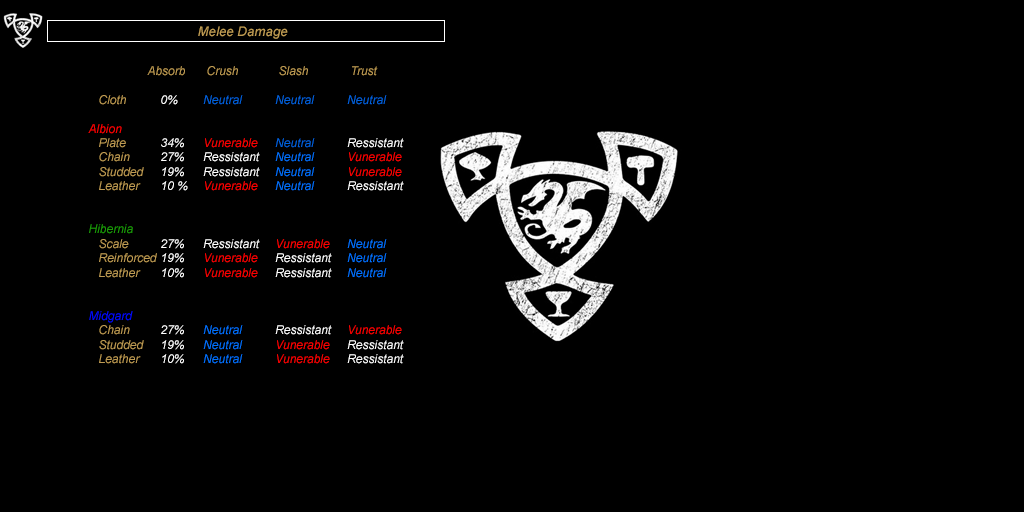
<style>
.page{position:relative;width:1024px;height:512px;background:#000000}
.page>*{position:absolute;margin:0}
.t1{font:13.3px "Arial-ItalicMT";color:#be9b53}
.t2{font:12px "Arial-ItalicMT";color:#be9b53}
.t3{font:12px "Arial-ItalicMT";color:#ff0000}
.t4{font:12px "Arial-ItalicMT";color:#ffffff}
.t5{font:12px "Arial-ItalicMT";color:#0062dd}
.t6{font:12px "Arial-ItalicMT";color:#0072ff}
.t7{font:12px "Arial-ItalicMT";color:#1c9b07}
.t8{font:12px "Arial-ItalicMT";color:#000cff}
</style>
<div class="page">
<p class="t1" style="left:198px;top:26px;width:90px;height:13px">Melee Damage</p>
<p class="t2" style="left:88px;top:66px;width:316px;height:298px"><span class="t3">        </span>Absorb    Crush            Slash    Trust<br><br>   Cloth <span class="t4">0%   </span><span class="t5">Neutral   Neutral   Neutral<br></span><span class="t3"><br>Albion<br></span>   Plate <span class="t4">34%   </span><span class="t3">Vunerable   </span><span class="t5">Neutral</span><span class="t4">   Ressistant<br></span>   Chain <span class="t4">27%   Ressistant   </span><span class="t6">Neutral   </span><span class="t3">Vunerable<br></span>   Studded <span class="t4">19%   Ressistant   </span><span class="t6">Neutral   </span><span class="t3">Vunerable<br></span>   Leather <span class="t4">10 %   </span><span class="t3">Vunerable   </span><span class="t6">Neutral</span><span class="t4">   Ressistant<br><br><br></span><span class="t7">Hibernia<br></span>   Scale <span class="t4">27%   Ressistant   </span><span class="t3">Vunerable   </span><span class="t6">Neutral<br></span>   Reinforced <span class="t4">19%   </span><span class="t3">Vunerable</span><span class="t4">   Ressistant   </span><span class="t6">Neutral<br></span>   Leather <span class="t4">10%   </span><span class="t3">Vunerable</span><span class="t4">   Ressistant   </span><span class="t6">Neutral<br><br><br></span><span class="t8">Midgard<br></span>   Chain <span class="t4">27%   </span><span class="t6">Neutral</span><span class="t4">   Ressistant   </span><span class="t3">Vunerable<br></span>   Studded <span class="t4">19%   </span><span class="t6">Neutral   </span><span class="t3">Vunerable</span><span class="t4">   Ressistant <br></span>   Leather <span class="t4">10%   </span><span class="t6">Neutral   </span><span class="t3">Vunerable</span><span class="t4">   Ressistant</span></p>
</div>
